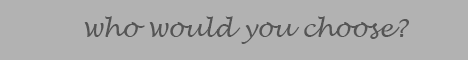
<style>
.page{position:relative;width:468px;height:60px;background:#b2b2b2}
.page>*{position:absolute;margin:0}
.t1{font:25px "LucidaHandwriting-Italic";color:#555555}
</style>
<div class="page">
<p class="t1" style="left:84px;top:16px;width:325px;height:28px">who would you choose?</p>
</div>
